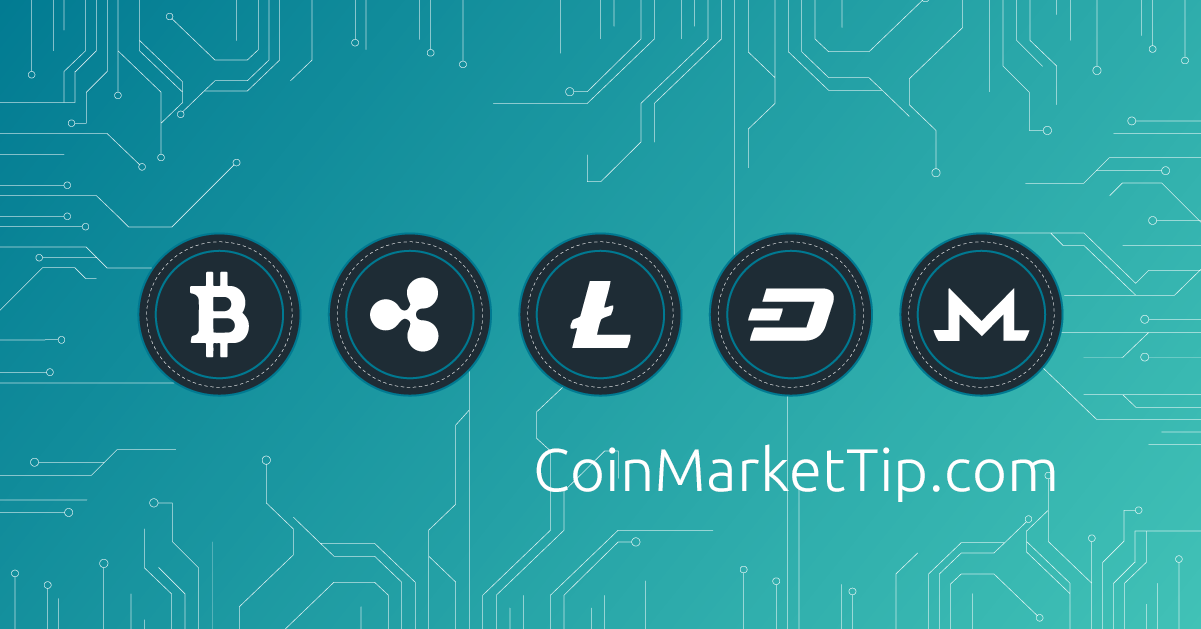
<style>
.page{position:relative;width:1201px;height:629px}
.page>*{position:absolute;margin:0}
.t1{font:60px "Ubuntu-Light";letter-spacing:0.005em;color:#ffffff}
</style>
<div class="page">
<p class="t1" style="left:536px;top:444px;width:519px;height:58px">CoinMarketTip.com</p>
</div>
